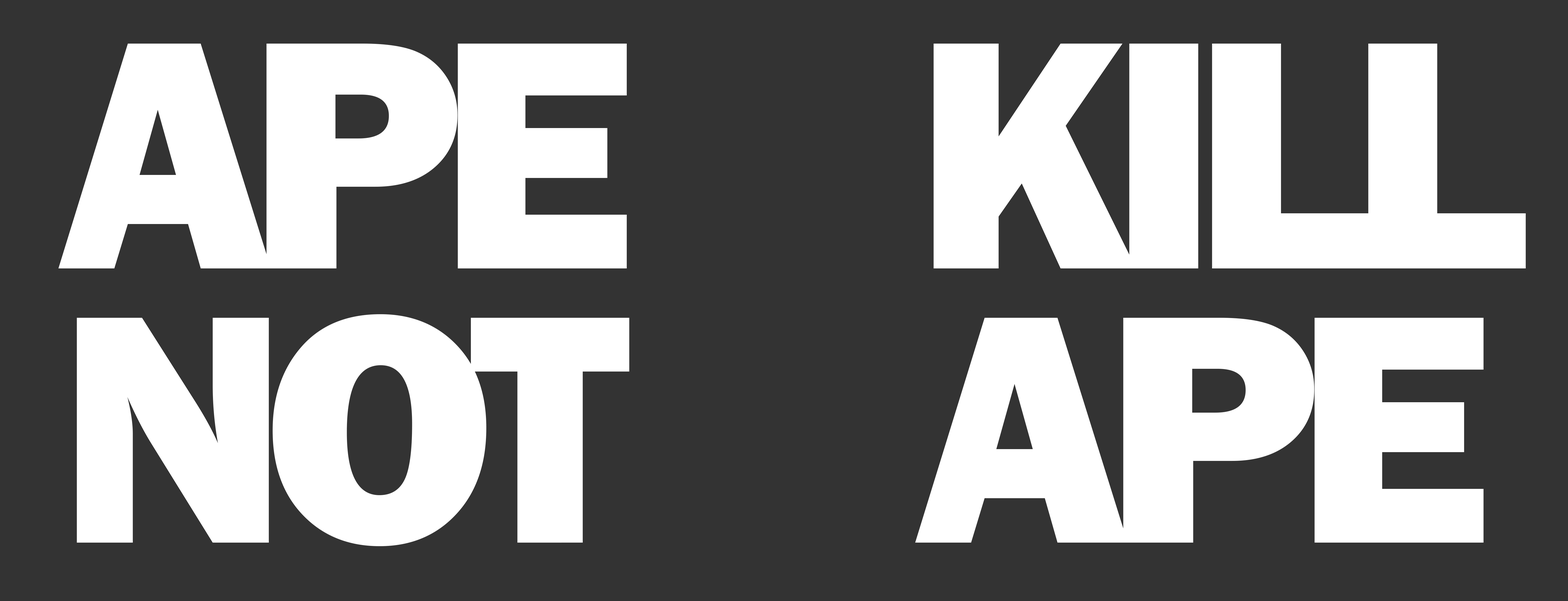
<style>
.page{position:relative;width:1568px;height:601px;background:#333333}
.page>*{position:absolute;margin:0}
.t1{font:337px/274.1px "FranklinGothic-Heavy";letter-spacing:-0.075em;color:#ffffff}
</style>
<div class="page">
<p class="t1" style="left:58px;top:44px;width:571px;height:502px">APE <br>NOT</p>
<p class="t1" style="left:915px;top:44px;width:611px;height:498px">KILL <br>APE</p>
</div>
